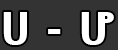
<style>
.page{position:relative;width:118px;height:50px;background:#333333}
.page>*{position:absolute;margin:0}
.t1{font:45.3px "Ebrima-Bold";letter-spacing:0.02em;color:#ffffff}
</style>
<div class="page">
<p class="t1" style="left:3px;top:12px;width:111px;height:33px">ሀ - ሆ</p>
</div>
